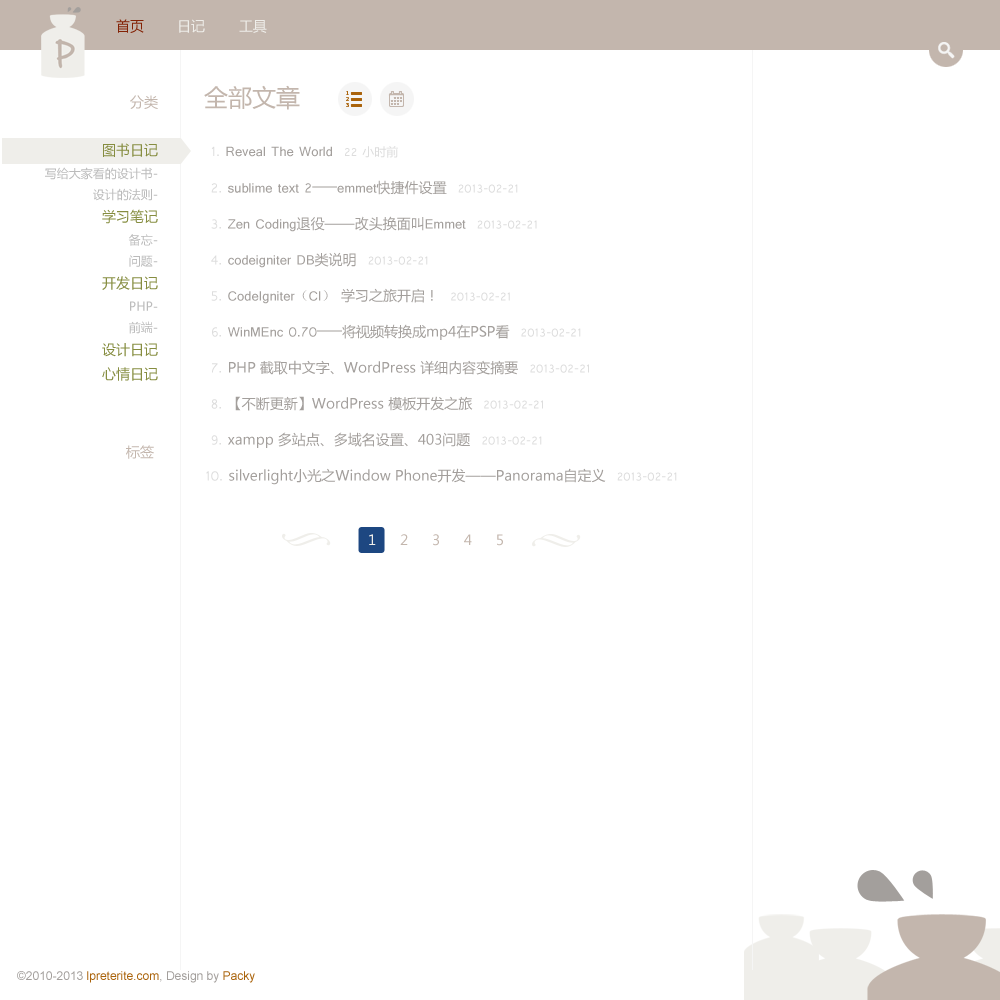
<style>
.page{position:relative;width:1000px;height:1000px;background:#ffffff}
.page>*{position:absolute;margin:0}
.t1{font:14px "MicrosoftYaHei";color:#832104}
.t2{font:14px "MicrosoftYaHei";color:#efeeea}
.t3{font:24px "MicrosoftYaHei";color:#c3b6ad}
.t4{font:12px "MicrosoftYaHei";color:#bbbbbb}
.t5{font:14px/48px "MicrosoftYaHei";color:#c3b6ad}
.t6{font:14px "MicrosoftYaHei";color:#868d40}
.t7{font:14px/36px "MicrosoftYaHei";color:#a39f9c}
.t8{font:14px/36px "Shruti";color:#c3b6ad}
.t9{font:14px/36px "Shruti";color:#dddddd}
.t10{font:14px/36px "Shruti";color:#a39f9c}
.t11{font:12px/36px "Shruti";color:#dddddd}
.t12{font:12px/36px "MicrosoftYaHei";color:#dddddd}
.t13{font:14px/36px "SimSun";color:#a39f9c}
.t14{font:14px "MicrosoftYaHei";color:#c3b6ad}
.t15{font:12px "ArialMT";color:#aa630b}
.t16{font:12px "ArialMT";color:#a39f9c}
</style>
<div class="page">
<p class="t1" style="left:116px;top:19px;width:28px;height:14px">首页</p>
<p class="t2" style="left:179px;top:19px;width:26px;height:14px">日记</p>
<p class="t2" style="left:239px;top:20px;width:28px;height:13px">工具</p>
<p class="t3" style="left:204px;top:85px;width:96px;height:25px">全部文章</p>
<p class="t4" style="left:45px;top:95px;width:113px;height:286px;text-align:right"><span class="t5">分类<br></span><span class="t6">图书日记<br></span>写给大家看的设计书-<br>设计的法则-<br><span class="t6">学习笔记<br></span>备忘-<br>问题-<br><span class="t6">开发日记<br></span>PHP-<br>前端-<br><span class="t6">设计日记<br>心情日记</span></p>
<p class="t7" style="left:206px;top:146px;width:471px;height:339px"><span class="t8"> </span><span class="t9">1. </span><span class="t10">Reveal The World  </span><span class="t11">22 </span><span class="t12">小时前<br> </span><span class="t9">2. </span><span class="t10">sublime text 2——emmet</span>快捷件设置  <span class="t11">2013-02-21<br> </span><span class="t9">3. </span><span class="t10">Zen Coding</span>退役——改头换面叫<span class="t10">Emmet  </span><span class="t11">2013-02-21<br> </span><span class="t9">4. </span><span class="t10">codeigniter DB</span>类说明  <span class="t11">2013-02-21<br> </span><span class="t9">5. </span><span class="t10">CodeIgniter</span><span class="t13">（</span><span class="t10">CI</span><span class="t13">） </span>学习之旅开启！  <span class="t11">2013-02-21<br> </span><span class="t9">6. </span><span class="t10">WinMEnc 0.70——</span>将视频转换成mp4在PSP看  <span class="t11">2013-02-21<br> </span><span class="t9">7. </span>PHP 截取中文字、WordPress 详细内容变摘要  <span class="t11">2013-02-21<br> </span><span class="t9">8. </span>【不断更新】WordPress 模板开发之旅  <span class="t11">2013-02-21<br> </span><span class="t9">9. </span>xampp 多站点、多域名设置、403问题  <span class="t11">2013-02-21<br></span><span class="t9">10. </span>silverlight小光之Window Phone开发——Panorama自定义  <span class="t11">2013-02-21</span></p>
<p class="t14" style="left:126px;top:445px;width:28px;height:14px">标签</p>
<p class="t15" style="left:17px;top:971px;width:238px;height:12px"><span class="t16">©2010-2013 </span>lpreterite.com<span class="t16">, Design by </span>Packy</p>
</div>
